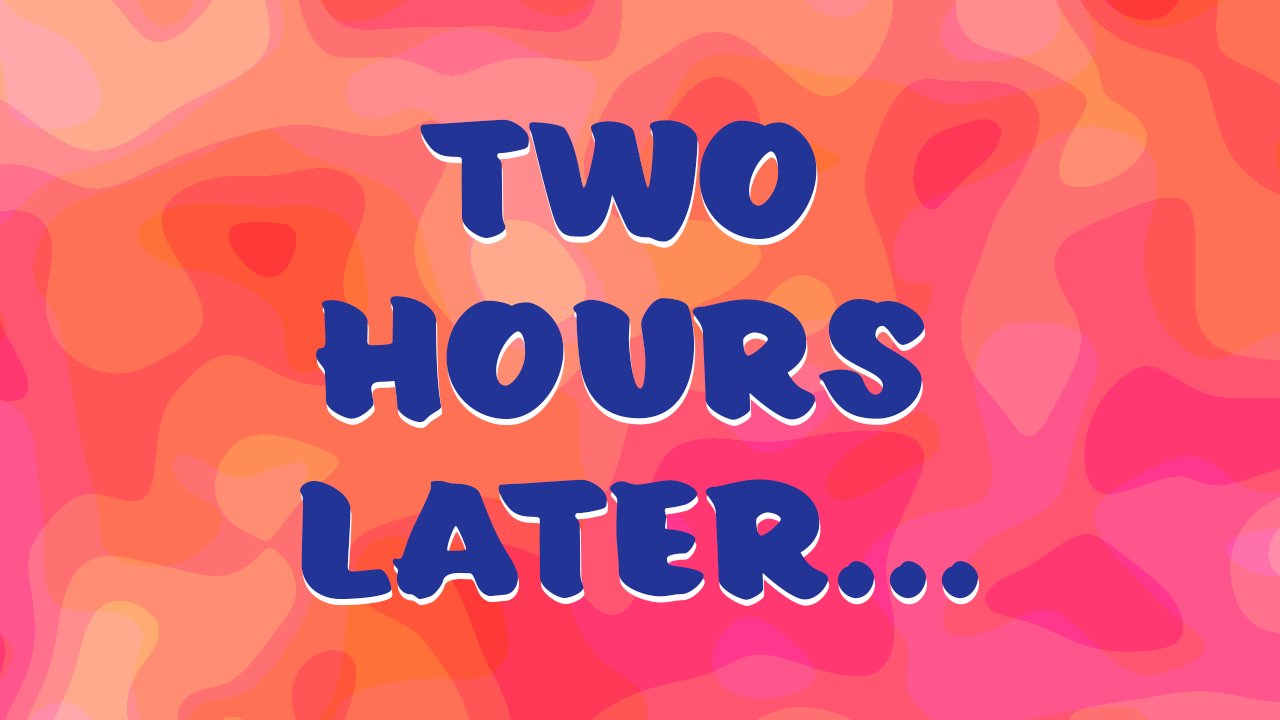
<style>
.page{position:relative;width:1280px;height:720px}
.page>*{position:absolute;margin:0}
.t1{font:150px "EdsMarketBold";color:#223597}
</style>
<div class="page">
<p class="t1" style="left:300px;top:119px;width:679px;height:481px;text-align:center">TWO <br>HOURS <br>LATER...</p>
<p class="t1" style="left:301px;top:125px;width:679px;height:481px;text-align:center">TWO <br>HOURS <br>LATER...</p>
</div>
